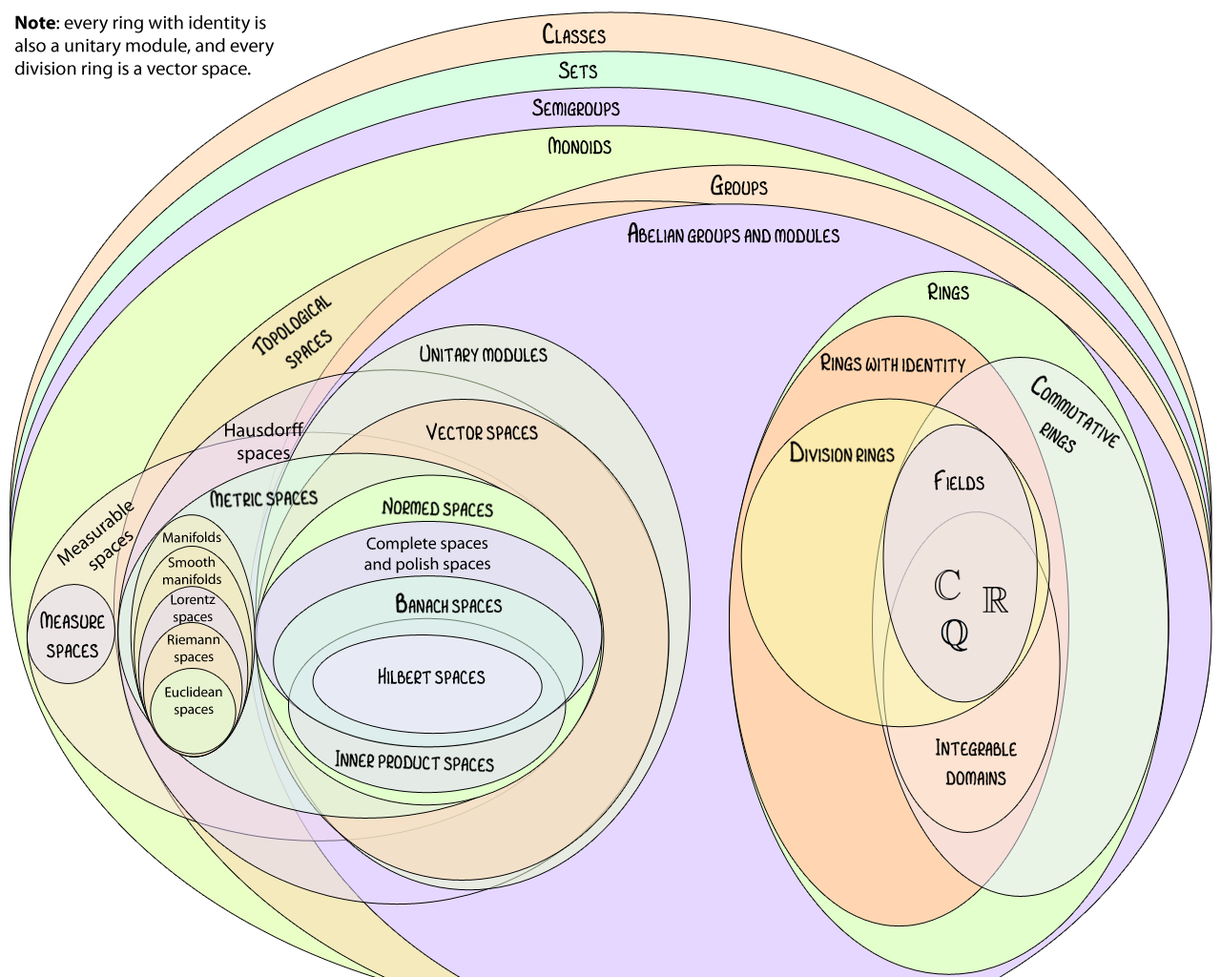
<style>
.page{position:relative;width:1221px;height:977px}
.page>*{position:absolute;margin:0}
.t1{font:19.1px "MyriadPro-Regular";color:#000000}
.t2{font:19.1px "MyriadPro-Bold";color:#000000}
.t3{font:24.3px "RepriseChords";color:#000000}
.t4{font:17.2px "RepriseChords";color:#000000}
.t5{font:23.7px "RepriseChords";color:#000000}
.t6{font:14.3px "MyriadPro-Regular";color:#000000}
.t7{font:17.2px "MyriadPro-Regular";color:#000000}
.t8{font:15.8px "RepriseChords";color:#000000}
.t9{font:16.2px "RepriseChords";color:#000000}
</style>
<div class="page">
<p class="t1" style="left:15px;top:15px;width:260px;height:64px"><span class="t2">Note</span>: every ring with identity is<br>also a unitary module, and every<br>division ring is a vector space.</p>
<p class="t3" style="left:543px;top:23px;width:63px;height:21px">Classes</p>
<p class="t3" style="left:559px;top:61px;width:38px;height:18px">Sets</p>
<p class="t3" style="left:532px;top:98px;width:88px;height:18px">Semigroups</p>
<p class="t3" style="left:548px;top:136px;width:63px;height:19px">Monoids</p>
<p class="t3" style="left:711px;top:175px;width:57px;height:21px">Groups</p>
<p class="t3" style="left:628px;top:222px;width:211px;height:21px">A<span class="t4">B</span>elian groups and modules</p>
<p class="t3" style="left:927px;top:282px;width:42px;height:17px">Rings</p>
<p class="t3" style="left:251px;top:295px;width:82px;height:75px;text-align:center;rotate:-37deg">Topological<br>spaces</p>
<p class="t3" style="left:420px;top:344px;width:127px;height:18px">Unitary modules</p>
<p class="t3" style="left:820px;top:352px;width:146px;height:21px;rotate:1deg">Rings with identity</p>
<p class="t3" style="left:1030px;top:375px;width:91px;height:79px;text-align:center;rotate:35deg">Commutative<br>rings</p>
<p class="t1" style="left:225px;top:422px;width:79px;height:42px;text-align:center;rotate:-1deg">Hausdorff<br>spaces</p>
<p class="t3" style="left:425px;top:422px;width:113px;height:19px">Vector spaces</p>
<p class="t3" style="left:789px;top:440px;width:106px;height:24px">Division rings</p>
<p class="t3" style="left:934px;top:469px;width:50px;height:21px">Fields</p>
<p class="t3" style="left:209px;top:488px;width:110px;height:21px;rotate:-2deg">Metric spaces</p>
<p class="t5" style="left:381px;top:496px;width:113px;height:22px;rotate:2deg">Normed spaces</p>
<p class="t1" style="left:56px;top:502px;width:78px;height:69px;text-align:center;rotate:-40deg">Measurable<br>spaces</p>
<p class="t6" style="left:163px;top:531px;width:58px;height:12px;rotate:-1deg">Manifolds</p>
<p class="t7" style="left:364px;top:536px;width:126px;height:37px;text-align:center">Complete spaces<br>and polish spaces</p>
<p class="t6" style="left:163px;top:556px;width:58px;height:29px;text-align:center;rotate:-1deg">Smooth<br>manifolds</p>
<p class="t5" style="left:395px;top:591px;width:108px;height:23px">Banach spaces</p>
<p class="t6" style="left:171px;top:594px;width:45px;height:31px;text-align:center;rotate:-1deg">Lorentz<br>spaces</p>
<p class="t3" style="left:40px;top:610px;width:65px;height:48px;text-align:center">Measure<br>spaces</p>
<p class="t6" style="left:168px;top:634px;width:51px;height:31px;text-align:center;rotate:-1deg">Riemann<br>spaces</p>
<p class="t5" style="left:378px;top:667px;width:107px;height:17px">Hil<span class="t8">B</span>ert spaces</p>
<p class="t6" style="left:165px;top:686px;width:57px;height:31px;text-align:center;rotate:-1deg">Euclidean<br>spaces</p>
<p class="t3" style="left:935px;top:737px;width:83px;height:49px;text-align:center;rotate:1deg">Integra<span class="t9">B</span>le<br>domains</p>
<p class="t5" style="left:335px;top:749px;width:160px;height:24px;rotate:2deg">Inner product spaces</p>
</div>
